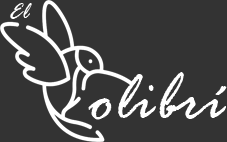
<style>
.page{position:relative;width:227px;height:142px;background:#333333}
.page>*{position:absolute;margin:0}
.t1{font:24px "RageItalic";color:#ffffff}
.t2{font:72px "RageItalic";color:#ffffff}
</style>
<div class="page">
<p class="t1" style="left:10px;top:3px;width:22px;height:16px">El</p>
<p class="t2" style="left:88px;top:72px;width:139px;height:48px">olibrí</p>
</div>
